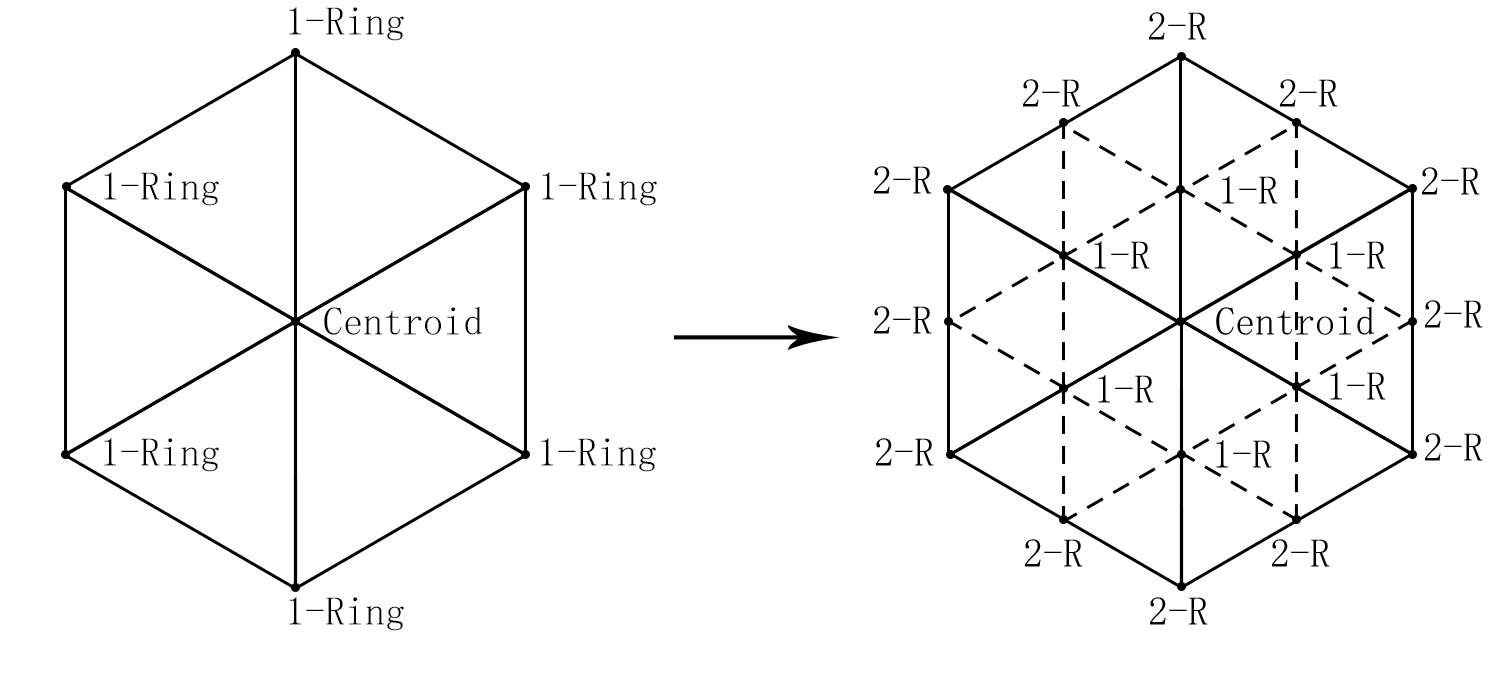
<style>
.page{position:relative;width:1500px;height:673px;background:#ffffff}
.page>*{position:absolute;margin:0}
.t1{font:40px "SimSun";color:#000000}
</style>
<div class="page">
<p class="t1" style="left:289px;top:7px;width:115px;height:34px">1-Ring</p>
<p class="t1" style="left:1149px;top:12px;width:58px;height:28px">2-R</p>
<p class="t1" style="left:1023px;top:79px;width:58px;height:28px">2-R</p>
<p class="t1" style="left:1280px;top:79px;width:58px;height:28px">2-R</p>
<p class="t1" style="left:104px;top:172px;width:115px;height:34px">1-Ring</p>
<p class="t1" style="left:542px;top:172px;width:115px;height:34px">1-Ring</p>
<p class="t1" style="left:874px;top:166px;width:58px;height:28px">2-R</p>
<p class="t1" style="left:1422px;top:167px;width:58px;height:28px">2-R</p>
<p class="t1" style="left:1222px;top:176px;width:56px;height:28px">1-R</p>
<p class="t1" style="left:1094px;top:241px;width:56px;height:28px">1-R</p>
<p class="t1" style="left:1330px;top:241px;width:56px;height:28px">1-R</p>
<p class="t1" style="left:1425px;top:300px;width:58px;height:28px">2-R</p>
<p class="t1" style="left:324px;top:306px;width:158px;height:29px">Centroid</p>
<p class="t1" style="left:874px;top:306px;width:58px;height:28px">2-R</p>
<p class="t1" style="left:1216px;top:306px;width:158px;height:29px">Centroid</p>
<p class="t1" style="left:1098px;top:375px;width:56px;height:28px">1-R</p>
<p class="t1" style="left:1330px;top:372px;width:56px;height:28px">1-R</p>
<p class="t1" style="left:104px;top:438px;width:115px;height:34px">1-Ring</p>
<p class="t1" style="left:541px;top:438px;width:115px;height:34px">1-Ring</p>
<p class="t1" style="left:876px;top:438px;width:58px;height:28px">2-R</p>
<p class="t1" style="left:1425px;top:433px;width:58px;height:28px">2-R</p>
<p class="t1" style="left:1216px;top:440px;width:56px;height:28px">1-R</p>
<p class="t1" style="left:1025px;top:539px;width:58px;height:28px">2-R</p>
<p class="t1" style="left:1272px;top:539px;width:58px;height:28px">2-R</p>
<p class="t1" style="left:289px;top:597px;width:115px;height:34px">1-Ring</p>
<p class="t1" style="left:1150px;top:597px;width:58px;height:28px">2-R</p>
</div>
